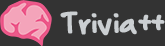
<style>
.page{position:relative;width:165px;height:46px;background:#333333}
.page>*{position:absolute;margin:0}
.t1{font:32px "FinurligDEMO-Regular";color:#cbcfd2;font-weight:bold}
</style>
<div class="page">
<p class="t1" style="left:60px;top:11px;width:105px;height:25px">Trivia++</p>
</div>
